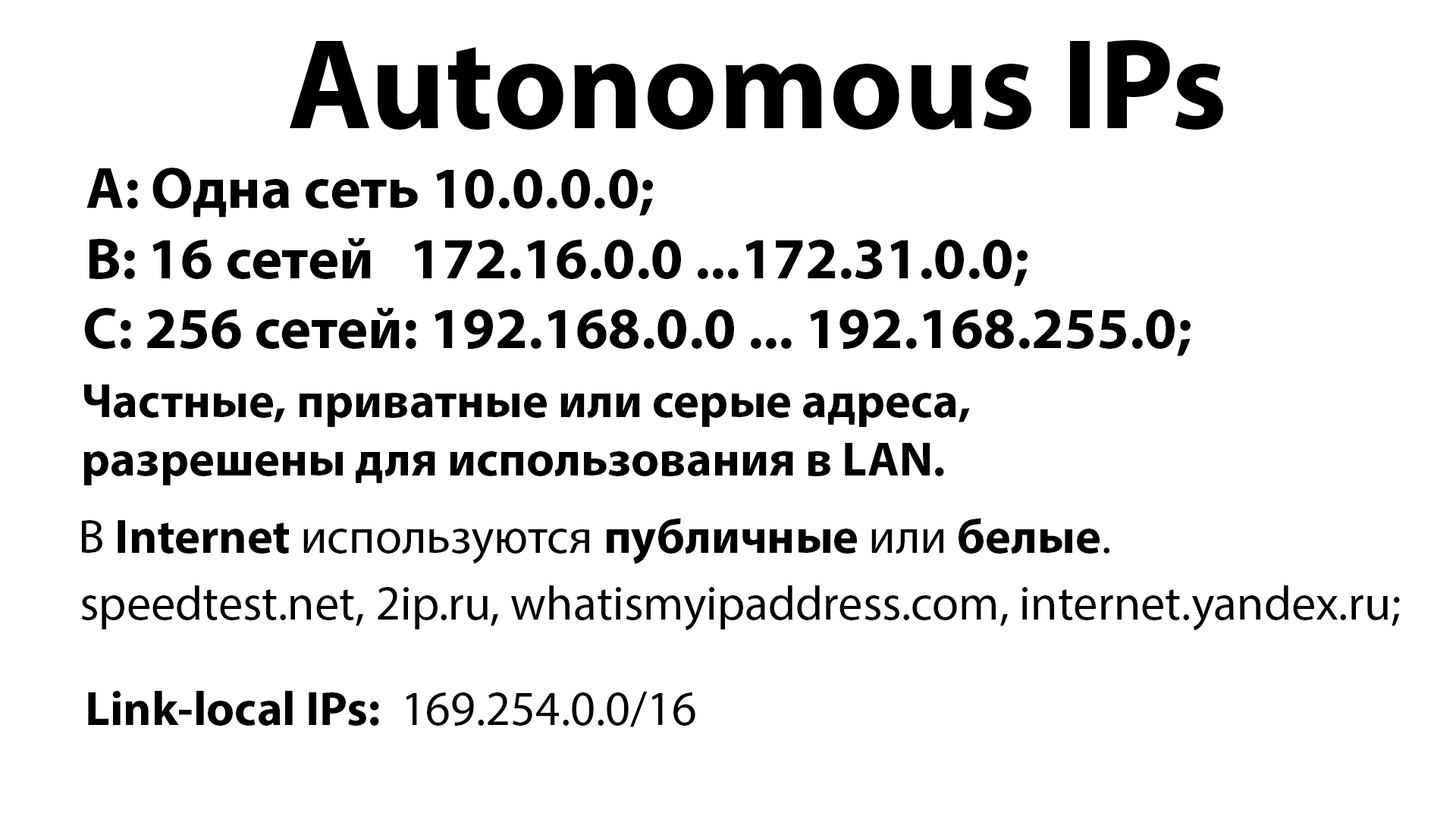
<style>
.page{position:relative;width:1456px;height:819px;background:#ffffff}
.page>*{position:absolute;margin:0}
.t1{font:129.4px "MyriadPro-Bold";color:#000000}
.t2{font:58.7px "MyriadPro-Bold";color:#000000}
.t3{font:48.5px "MyriadPro-Bold";color:#000000}
.t4{font:48.5px "MyriadPro-Regular";color:#000000}
</style>
<div class="page">
<p class="t1" style="left:290px;top:39px;width:933px;height:91px">Autonomous IPs</p>
<p class="t2" style="left:86px;top:168px;width:942px;height:119px">A: Одна сеть 10.0.0.0;<br>B: 16 сетей   172.16.0.0 ...172.31.0.0;</p>
<p class="t2" style="left:84px;top:308px;width:1107px;height:48px">C: 256 сетей: 192.168.0.0 ... 192.168.255.0;</p>
<p class="t3" style="left:83px;top:384px;width:887px;height:101px">Частные, приватные или серые адреса, <br>разрешены для использования в LAN.</p>
<p class="t4" style="left:82px;top:518px;width:1027px;height:46px">В <span class="t3">Internet </span>используются <span class="t3">публичные </span>или <span class="t3">белые</span>.</p>
<p class="t4" style="left:81px;top:585px;width:1319px;height:46px">speedtest.net, 2ip.ru, whatismyipaddress.com, internet.yandex.ru;</p>
<p class="t3" style="left:88px;top:691px;width:607px;height:36px">Link-local IPs:<span class="t4">  169.254.0.0/16</span></p>
</div>
